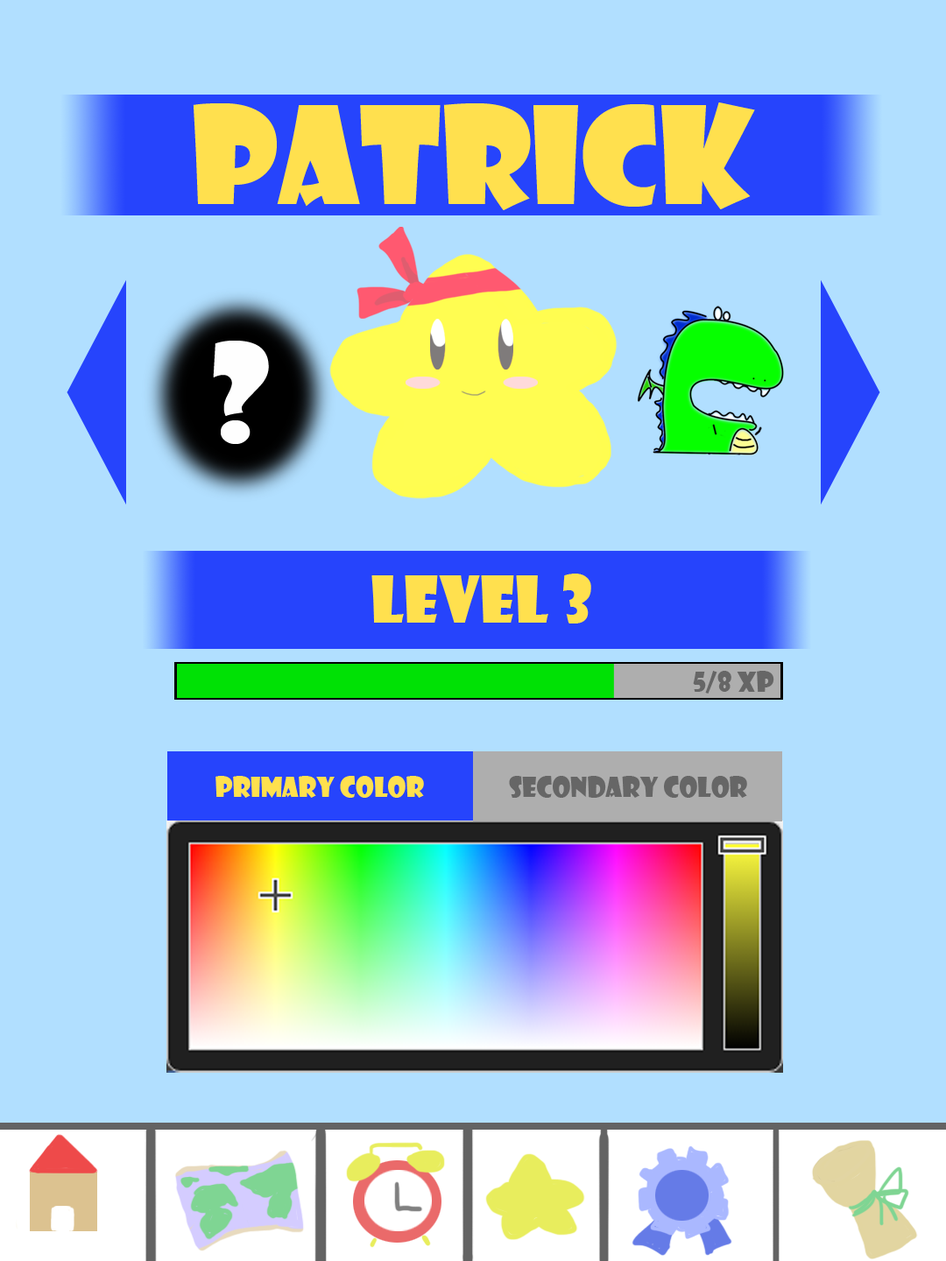
<style>
.page{position:relative;width:946px;height:1261px;background:#b1dfff}
.page>*{position:absolute;margin:0}
.t1{font:131.3px "ShowcardGothic-Reg";color:#ffe04e}
.t2{font:131.3px "ShowcardGothic-Reg";color:#fefefe}
.t3{font:63px "ShowcardGothic-Reg";color:#ffe04e}
.t4{font:26.3px "ShowcardGothic-Reg";color:#666666}
.t5{font:26.3px "ShowcardGothic-Reg";color:#ffe04e}
</style>
<div class="page">
<p class="t1" style="left:193px;top:102px;width:562px;height:108px">Patrick</p>
<p class="t2" style="left:213px;top:341px;width:56px;height:103px">?</p>
<p class="t3" style="left:371px;top:574px;width:220px;height:49px">level 3</p>
<p class="t4" style="left:693px;top:671px;width:81px;height:23px">5/8 xp</p>
<p class="t5" style="left:215px;top:776px;width:209px;height:22px">primary color</p>
<p class="t4" style="left:509px;top:776px;width:238px;height:22px">Secondary Color</p>
</div>
